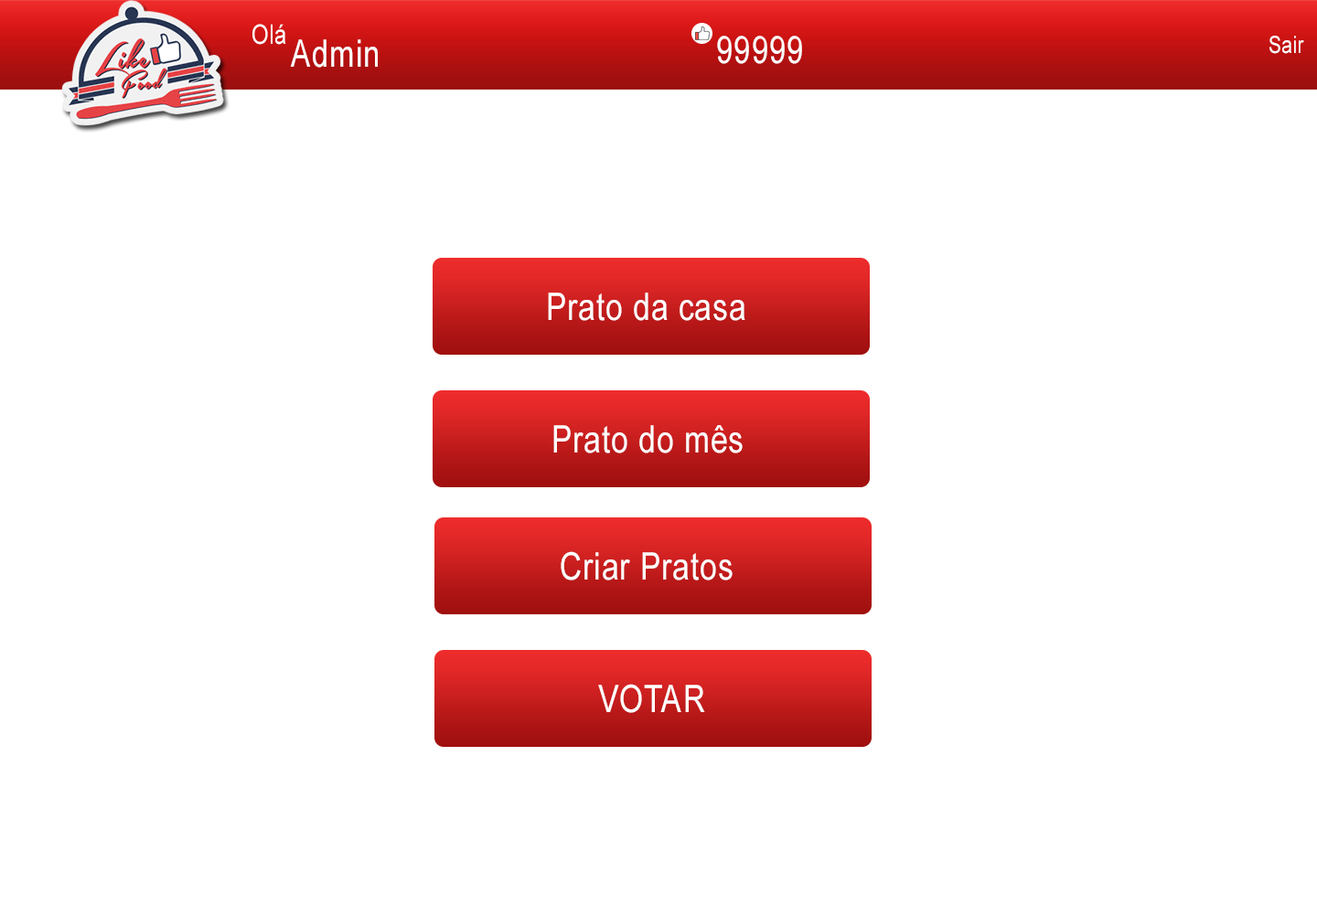
<style>
.page{position:relative;width:1317px;height:905px;background:#ffffff}
.page>*{position:absolute;margin:0}
.t1{font:27.1px "ArialMT";letter-spacing:0.029em;color:#ffffff;scale:0.8 1}
.t2{font:37.9px "ArialMT";letter-spacing:0.029em;color:#ffffff;scale:0.79 1}
.t3{font:24px "ArialMT";letter-spacing:0.029em;color:#ffffff;scale:0.79 1}
.t4{font:37.9px "ArialMT";letter-spacing:0.029em;color:#ffffff;scale:0.81 1}
</style>
<div class="page">
<p class="t1" style="left:252px;top:24px;width:34px;height:21px">Olá</p>
<p class="t2" style="left:290px;top:39px;width:88px;height:29px">Admin</p>
<p class="t2" style="left:717px;top:36px;width:85px;height:28px">99999</p>
<p class="t3" style="left:1269px;top:36px;width:35px;height:18px">Sair</p>
<p class="t4" style="left:548px;top:293px;width:197px;height:28px">Prato da casa</p>
<p class="t4" style="left:553px;top:425px;width:190px;height:29px">Prato do mês</p>
<p class="t4" style="left:561px;top:551px;width:172px;height:30px">Criar Pratos</p>
<p class="t4" style="left:598px;top:684px;width:107px;height:29px">VOTAR</p>
</div>
